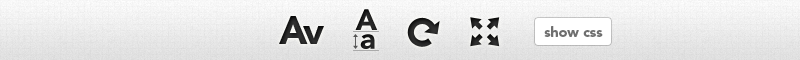
<style>
.page{position:relative;width:800px;height:60px}
.page>*{position:absolute;margin:0}
.t1{font:38.2px "AvenirLTStd-Black";color:#333333}
.t2{font:29.1px "AvenirLTStd-Black";color:#333333}
.t3{font:14px "AvenirLTStd-Black";color:#6f6f6f}
</style>
<div class="page">
<p class="t1" style="left:279px;top:16px;width:45px;height:28px">Av</p>
<p class="t2" style="left:355px;top:9px;width:23px;height:21px">A</p>
<p class="t3" style="left:544px;top:26px;width:59px;height:11px">show css</p>
<p class="t2" style="left:360px;top:34px;width:15px;height:15px">a</p>
</div>
